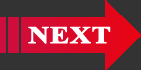
<style>
.page{position:relative;width:141px;height:70px;background:#333333}
.page>*{position:absolute;margin:0}
.t1{font:24px "TimesNewRomanPS-BoldMT";color:#ffffff;font-weight:bold;scale:1.2 1}
</style>
<div class="page">
<p class="t1" style="left:28px;top:26px;width:83px;height:18px">NEXT</p>
</div>
